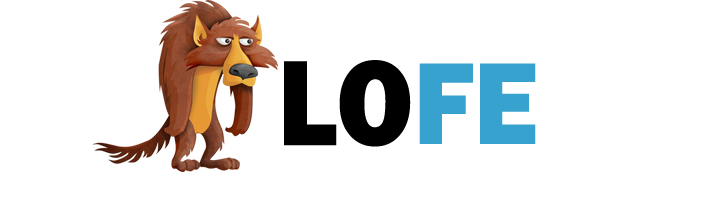
<style>
.page{position:relative;width:720px;height:202px;background:#ffffff}
.page>*{position:absolute;margin:0}
.t1{font:125.8px "FranklinGothic-Heavy";color:#000000;scale:0.89 1}
.t2{font:120.5px "FranklinGothic-Heavy";color:#36a2cd;scale:0.91 1}
</style>
<div class="page">
<p class="t1" style="left:284px;top:60px;width:127px;height:87px">LO</p>
<p class="t2" style="left:419px;top:63px;width:117px;height:81px">FE</p>
</div>
